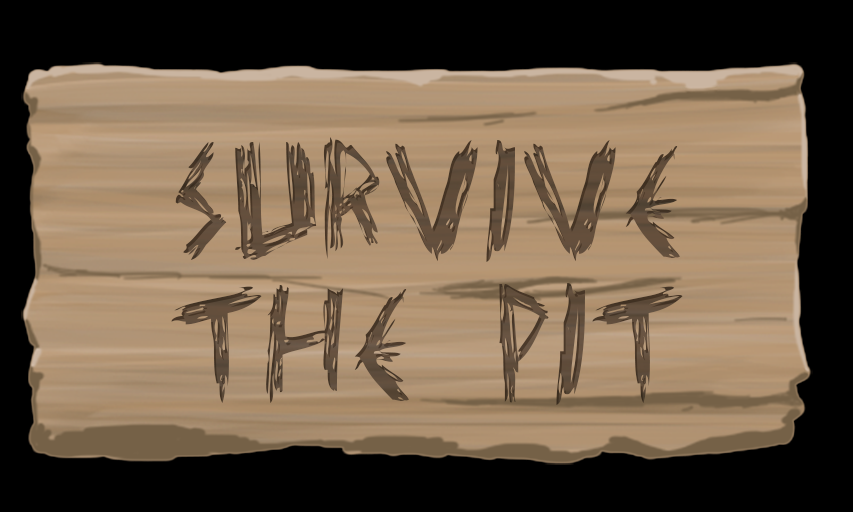
<style>
.page{position:relative;width:853px;height:512px;background:#000000}
.page>*{position:absolute;margin:0}
.t1{font:170.7px/143.4px "Elmar'sscratchtype";color:#5f4c3a}
</style>
<div class="page">
<p class="t1" style="left:171px;top:137px;width:512px;height:268px;text-align:center">SURVIVE<br>THE PIT</p>
</div>
